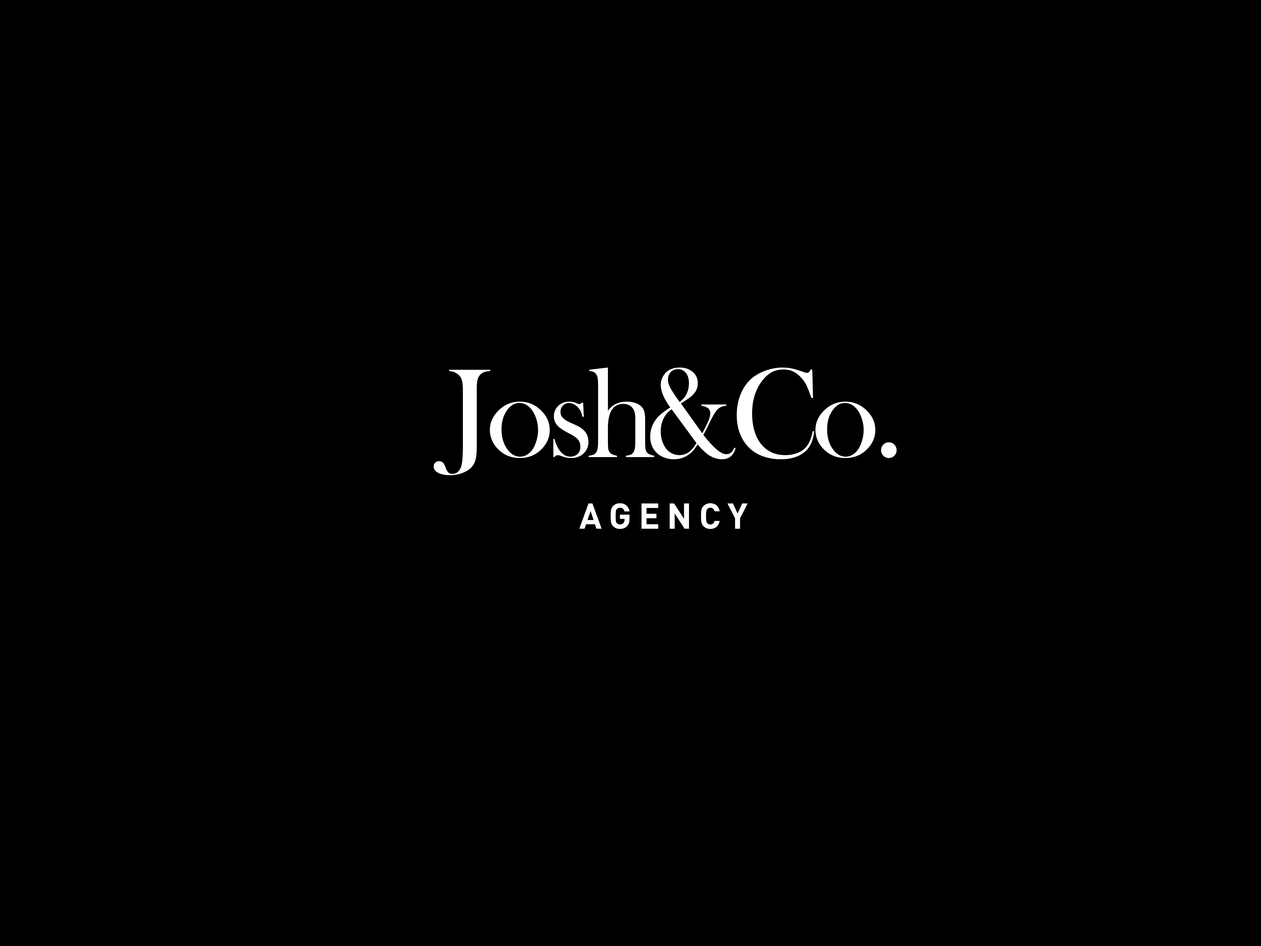
<style>
.page{position:relative;width:1261px;height:946px;background:#000000}
.page>*{position:absolute;margin:0}
.t1{font:130.9px "BaskOldFace";letter-spacing:-0.05em;color:#ffffff}
.t2{font:35.3px "AdihausDIN-Bold";letter-spacing:0.2em;color:#ffffff}
</style>
<div class="page">
<p class="t1" style="left:433px;top:367px;width:464px;height:108px">Josh&amp;Co.</p>
<p class="t2" style="left:579px;top:503px;width:169px;height:26px">AGENCY</p>
</div>
